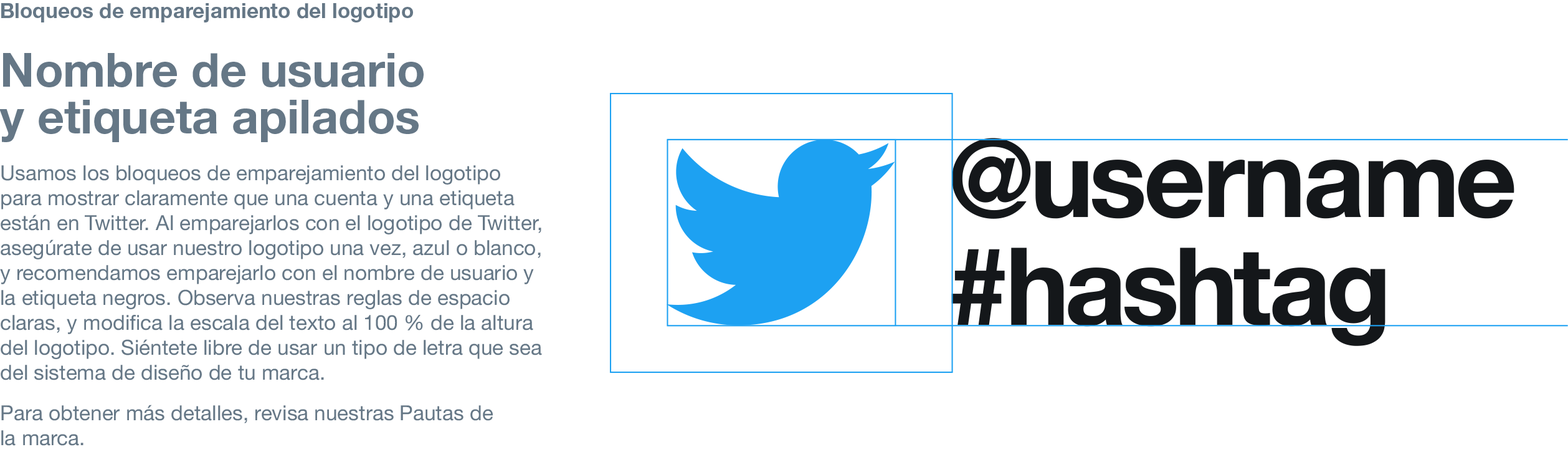
<style>
.page{position:relative;width:1568px;height:467px;background:#ffffff}
.page>*{position:absolute;margin:0}
.t1{font:20.8px "HelveticaNeue";color:#657786}
.t2{font:20.8px/46.7px "HelveticaNeue-Bold";color:#657786}
.t3{font:46.7px/46.7px "HelveticaNeue-Bold";color:#657786}
.t4{font:107.8px/107.8px "HelveticaNeue-Bold";letter-spacing:-0.025em;color:#14171a}
</style>
<div class="page">
<p class="t1" style="left:0px;top:3px;width:542px;height:442px"><span class="t2">Bloqueos de emparejamiento del logotipo<br><br></span><span class="t3">Nombre de usuario <br>y etiqueta apilados<br><br></span>Usamos los bloqueos de emparejamiento del logotipo para mostrar claramente que una cuenta y una etiqueta están en Twitter. Al emparejarlos con el logotipo de Twitter, asegúrate de usar nuestro logotipo una vez, azul o blanco, y recomendamos emparejarlo con el nombre de usuario y la etiqueta negros. Observa nuestras reglas de espacio claras, y modifica la escala del texto al 100 % de la altura del logotipo. Siéntete libre de usar un tipo de letra que sea del sistema de diseño de tu marca.<br><br>Para obtener más detalles, revisa nuestras Pautas de <br>la marca.</p>
<p class="t4" style="left:951px;top:138px;width:563px;height:208px">@username<br>#hashtag</p>
</div>
